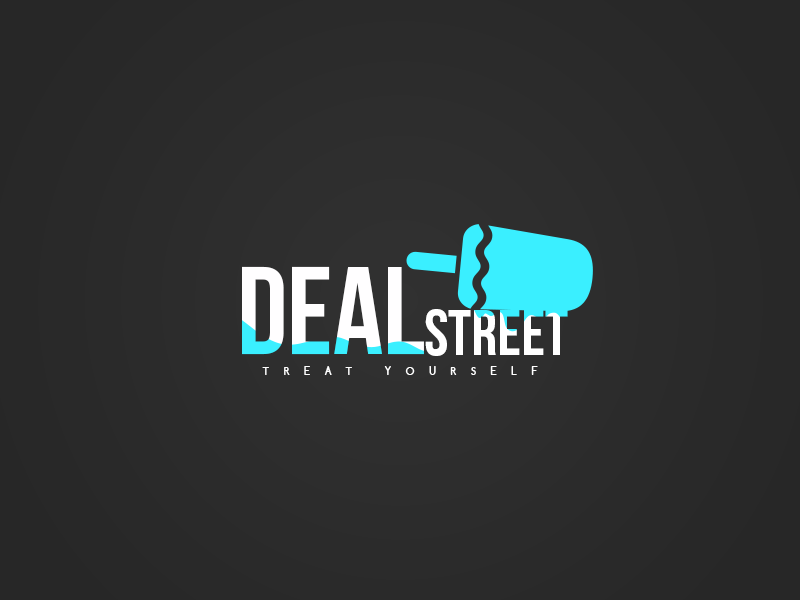
<style>
.page{position:relative;width:800px;height:600px}
.page>*{position:absolute;margin:0}
.t1{font:123.8px "BebasNeueBold";color:#fffeff}
.t2{font:64.4px "BebasNeueBold";color:#ffffff}
.t3{font:12px "Comfortaa-Bold";letter-spacing:1.3em;color:#ffffff;scale:0.96 1}
</style>
<div class="page">
<p class="t1" style="left:242px;top:266px;width:182px;height:89px">DEAL</p>
<p class="t2" style="left:425px;top:309px;width:143px;height:47px">StreeT</p>
<p class="t3" style="left:262px;top:366px;width:276px;height:9px">TREAT YOURSELF</p>
</div>
